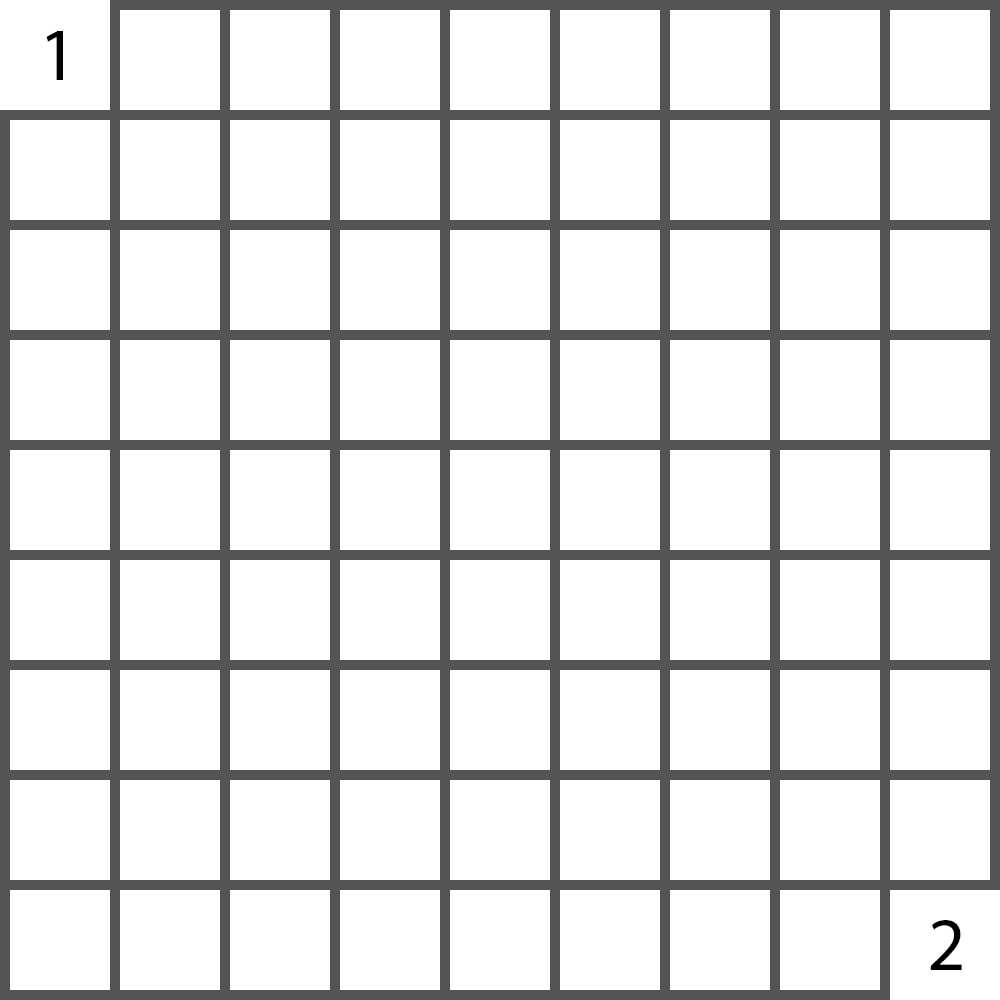
<style>
.page{position:relative;width:1000px;height:1000px;background:#ffffff}
.page>*{position:absolute;margin:0}
.t1{font:75px "MyriadPro-Regular";color:#000000}
</style>
<div class="page">
<p class="t1" style="left:46px;top:31px;width:17px;height:49px">1</p>
<p class="t1" style="left:930px;top:920px;width:32px;height:50px">2</p>
</div>
